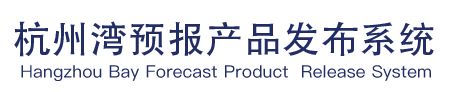
<style>
.page{position:relative;width:454px;height:92px;background:#ffffff}
.page>*{position:absolute;margin:0}
.t1{font:37px "AdobeHeitiStd-Regular";letter-spacing:0.01em;color:#222d65;scale:1.03 1}
.t2{font:17px "PingFangSC-Regular";letter-spacing:0.01em;color:#222d65;scale:1.03 1}
</style>
<div class="page">
<p class="t1" style="left:14px;top:21px;width:420px;height:36px">杭州湾预报产品发布系统</p>
<p class="t2" style="left:21px;top:65px;width:410px;height:16px">Hangzhou Bay Forecast Product  Release System</p>
</div>
